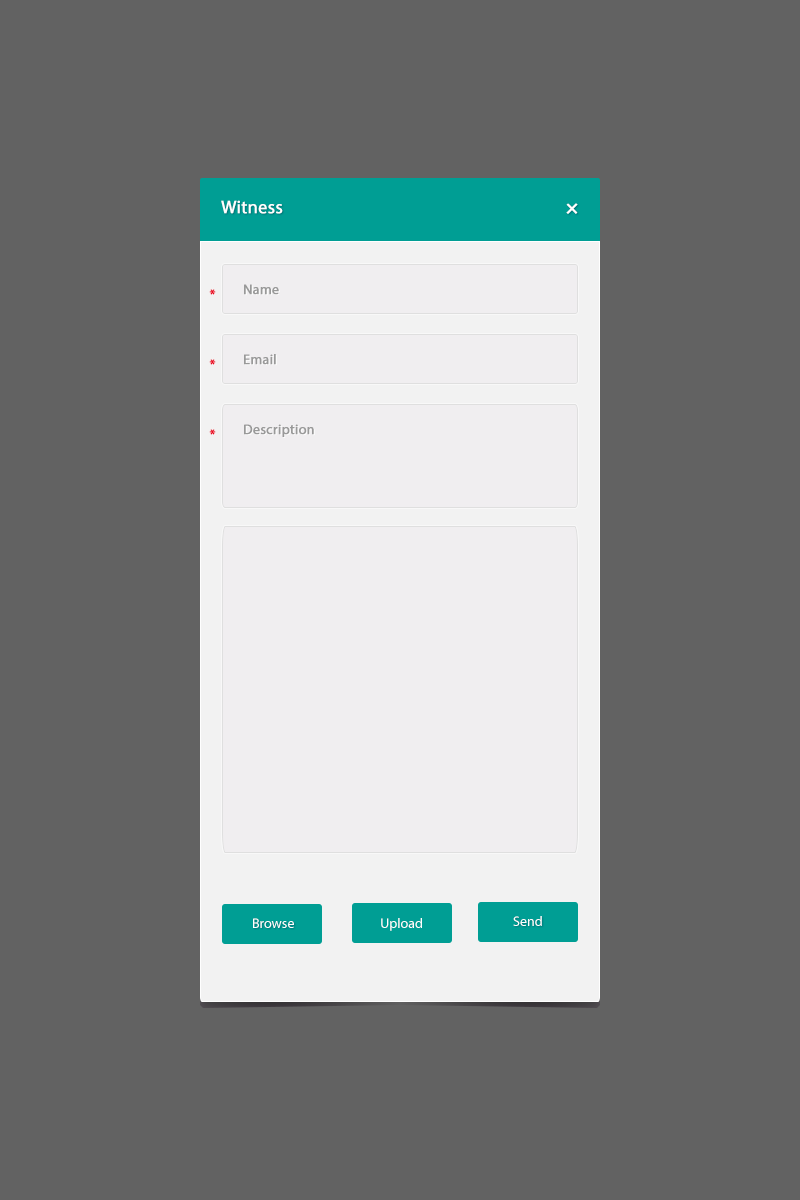
<style>
.page{position:relative;width:800px;height:1200px;background:#626262}
.page>*{position:absolute;margin:0}
.t1{font:18px "MyriadPro-Regular";color:#ffffff;font-weight:bold}
.t2{font:24px "MyriadPro-Regular";color:#ffffff;font-weight:bold}
.t3{font:14px "MyriadPro-Regular";color:#eb0621;font-weight:bold}
.t4{font:14px "MyriadPro-Regular";color:#999999;font-weight:bold}
.t5{font:14px "MyriadPro-Regular";color:#ffffff}
</style>
<div class="page">
<p class="t1" style="left:221px;top:200px;width:62px;height:14px">Witness</p>
<p class="t2" style="left:566px;top:203px;width:12px;height:11px;rotate:45deg">+</p>
<p class="t3" style="left:209px;top:289px;width:7px;height:6px">*</p>
<p class="t4" style="left:244px;top:284px;width:35px;height:11px">Name</p>
<p class="t3" style="left:209px;top:359px;width:7px;height:6px">*</p>
<p class="t4" style="left:244px;top:354px;width:32px;height:11px">Email</p>
<p class="t4" style="left:244px;top:424px;width:70px;height:13px">Description</p>
<p class="t3" style="left:209px;top:429px;width:7px;height:6px">*</p>
<p class="t5" style="left:253px;top:918px;width:41px;height:10px">Browse</p>
<p class="t5" style="left:381px;top:918px;width:41px;height:13px">Upload</p>
<p class="t5" style="left:513px;top:916px;width:29px;height:10px">Send</p>
</div>
